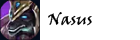
<style>
.page{position:relative;width:140px;height:40px;background:#ffffff}
.page>*{position:absolute;margin:0}
.t1{font:12px "VinerHandITC";color:#000000}
</style>
<div class="page">
<p class="t1" style="left:48px;top:12px;width:44px;height:14px">Nasus</p>
</div>
